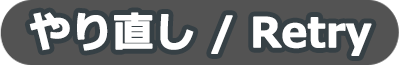
<style>
.page{position:relative;width:399px;height:65px;background:#535353}
.page>*{position:absolute;margin:0}
.t1{font:40.5px "Meiryo-Bold";color:#ffffff;font-weight:bold}
</style>
<div class="page">
<p class="t1" style="left:29px;top:12px;width:343px;height:44px">やり直し / Retry</p>
</div>
